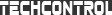
<style>
.page{position:relative;width:112px;height:15px;background:#ffffff}
.page>*{position:absolute;margin:0}
.t1{font:20px "JohnnyFever-Regular";color:#ffffff}
</style>
<div class="page">
<p class="t1" style="left:0px;top:1px;width:113px;height:14px">TECHCONTROL</p>
</div>
